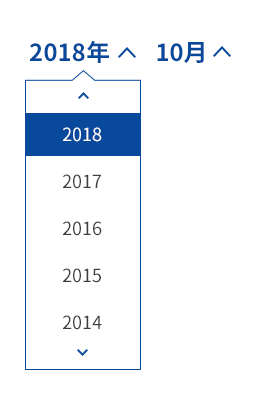
<style>
.page{position:relative;width:256px;height:410px;background:#ffffff}
.page>*{position:absolute;margin:0}
.t1{font:23.7px "SourceHanSansCN-Bold";color:#08499c}
.t2{font:18px "SourceHanSansCN-Regular";color:#ffffff}
.t3{font:18px "SourceHanSansCN-Regular";color:#3e3e3e}
</style>
<div class="page">
<p class="t1" style="left:30px;top:40px;width:79px;height:23px">2018年</p>
<p class="t1" style="left:157px;top:42px;width:47px;height:21px">10月</p>
<p class="t2" style="left:63px;top:127px;width:39px;height:15px">2018</p>
<p class="t3" style="left:63px;top:174px;width:38px;height:15px">2017</p>
<p class="t3" style="left:63px;top:221px;width:39px;height:15px">2016</p>
<p class="t3" style="left:63px;top:268px;width:38px;height:15px">2015</p>
<p class="t3" style="left:63px;top:315px;width:39px;height:15px">2014</p>
</div>
